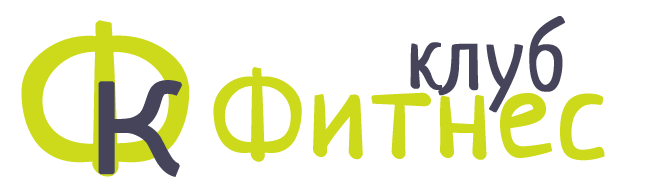
<style>
.page{position:relative;width:663px;height:185px;background:#ffffff}
.page>*{position:absolute;margin:0}
.t1{font:84px "Neucha";letter-spacing:0.035em;color:#45445a;font-weight:bold}
.t2{font:197.6px "Neucha";letter-spacing:0.015em;color:#cdda1c;font-weight:bold;scale:1.16 1}
.t3{font:120px "Neucha";letter-spacing:0.035em;color:#cdda1c;font-weight:bold}
.t4{font:129.3px "BellotaText-Bold";letter-spacing:0.015em;color:#45445a;font-weight:bold;scale:1.16 1}
</style>
<div class="page">
<p class="t1" style="left:410px;top:16px;width:155px;height:97px">клуб</p>
<p class="t2" style="left:21px;top:20px;width:169px;height:157px">Ф</p>
<p class="t3" style="left:213px;top:67px;width:392px;height:95px">Фитнес</p>
<p class="t4" style="left:98px;top:80px;width:85px;height:97px">К</p>
</div>
